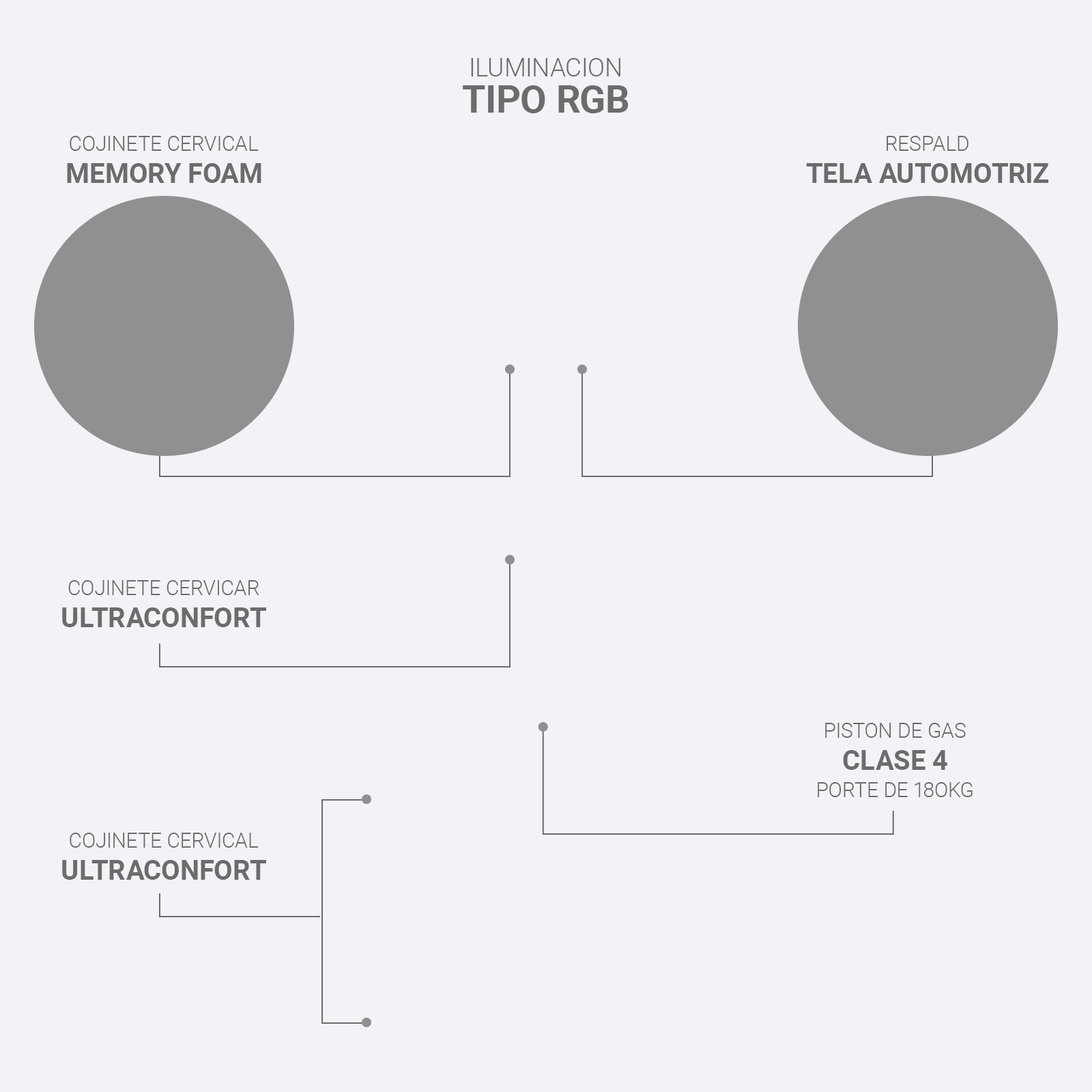
<style>
.page{position:relative;width:1092px;height:1092px;background:#f2f3f6}
.page>*{position:absolute;margin:0}
.t1{font:25.5px "Roboto-Light";color:#6c6c6c}
.t2{font:38.2px "Roboto-Bold";color:#6c6c6c}
.t3{font:20.5px "Roboto-Light";color:#6c6c6c}
.t4{font:27.3px "Roboto-Bold";color:#6c6c6c}
</style>
<div class="page">
<p class="t1" style="left:471px;top:58px;width:149px;height:18px">ILUMINACION</p>
<p class="t2" style="left:463px;top:85px;width:166px;height:28px">TIPO RGB</p>
<p class="t3" style="left:70px;top:136px;width:189px;height:15px">COJINETE CERVICAL</p>
<p class="t3" style="left:887px;top:136px;width:81px;height:15px">RESPALD</p>
<p class="t4" style="left:67px;top:163px;width:194px;height:20px">MEMORY FOAM</p>
<p class="t4" style="left:806px;top:163px;width:243px;height:20px">TELA AUTOMOTRIZ</p>
<p class="t3" style="left:68px;top:580px;width:191px;height:15px">COJINETE CERVICAR</p>
<p class="t4" style="left:62px;top:607px;width:204px;height:20px">ULTRACONFORT</p>
<p class="t3" style="left:825px;top:723px;width:141px;height:15px">PISTON DE GAS</p>
<p class="t4" style="left:843px;top:750px;width:104px;height:20px">CLASE 4</p>
<p class="t3" style="left:818px;top:782px;width:155px;height:15px">PORTE DE 18OKG</p>
<p class="t3" style="left:70px;top:833px;width:189px;height:15px">COJINETE CERVICAL</p>
<p class="t4" style="left:62px;top:860px;width:204px;height:20px">ULTRACONFORT</p>
</div>
